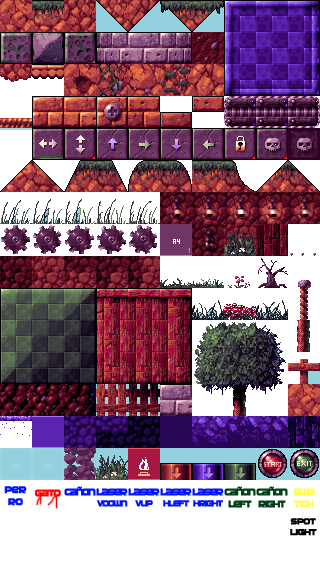
<style>
.page{position:relative;width:320px;height:576px;background:#ffffff}
.page>*{position:absolute;margin:0}
.t1{font:10px "SFAutomaton-Bold";letter-spacing:-0.01em;color:#0012ff;font-weight:bold}
.t2{font:10px "SFAutomaton-Bold";letter-spacing:-0.1em;color:#0012ff;font-weight:bold}
.t3{font:10px "SFAutomaton-Bold";letter-spacing:-0.1em;color:#014016;font-weight:bold}
.t4{font:10px "SFAutomaton-Bold";letter-spacing:-0.075em;color:#ff0000;font-weight:bold}
.t5{font:9px "SFAutomaton-Bold";letter-spacing:-0.1em;color:#0012ff;font-weight:bold}
.t6{font:10px "SFAutomaton-Bold";letter-spacing:-0.01em;color:#fdff49;font-weight:bold}
.t7{font:9px "SFAutomaton-Bold";letter-spacing:-0.01em;color:#000000;font-weight:bold}
</style>
<div class="page">
<p class="t1" style="left:4px;top:486px;width:23px;height:20px;text-align:center">per<br>ro</p>
<p class="t2" style="left:64px;top:486px;width:32px;height:10px">cañon</p>
<p class="t3" style="left:224px;top:486px;width:32px;height:22px;text-align:center">cañon<br>left</p>
<p class="t3" style="left:256px;top:486px;width:32px;height:22px;text-align:center">cañon<br>right</p>
<p class="t4" style="left:35px;top:489px;width:26px;height:8px">gato</p>
<p class="t2" style="left:96px;top:488px;width:32px;height:19px;text-align:center">laser<br><span class="t5">vdown</span></p>
<p class="t2" style="left:128px;top:488px;width:32px;height:19px;text-align:center">laser<br><span class="t5">vup</span></p>
<p class="t2" style="left:160px;top:488px;width:32px;height:19px;text-align:center">laser<br><span class="t5">hleft</span></p>
<p class="t5" style="left:192px;top:488px;width:32px;height:19px;text-align:center"><span class="t2">laser<br></span>hright</p>
<p class="t6" style="left:293px;top:488px;width:22px;height:20px;text-align:center">swii<br>tch</p>
<p class="t7" style="left:290px;top:518px;width:27px;height:18px;text-align:center">spot<br>light</p>
</div>
